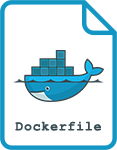
<style>
.page{position:relative;width:117px;height:150px;background:#ffffff}
.page>*{position:absolute;margin:0}
.t1{font:13.4px "CourierNewPS-BoldMT";letter-spacing:0.05em;color:#394d54}
</style>
<div class="page">
<p class="t1" style="left:15px;top:121px;width:86px;height:10px">Dockerfile</p>
</div>
